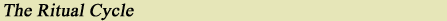
<style>
.page{position:relative;width:447px;height:21px;background:#e6e6b8}
.page>*{position:absolute;margin:0}
.t1{font:18px "TimesNewRomanPSMT";color:#010101;font-weight:bold;font-style:italic}
</style>
<div class="page">
<p class="t1" style="left:4px;top:3px;width:130px;height:18px">The Ritual Cycle</p>
</div>
